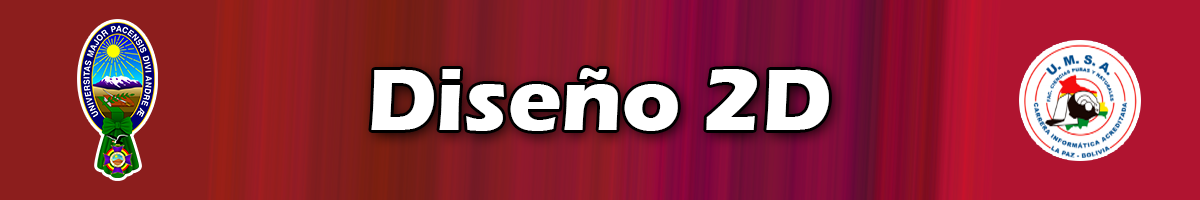
<style>
.page{position:relative;width:1200px;height:200px}
.page>*{position:absolute;margin:0}
.t1{font:90px "ErasITC-Bold";color:#000000}
</style>
<div class="page">
<p class="t1" style="left:371px;top:68px;width:458px;height:63px">Diseño 2D</p>
</div>
